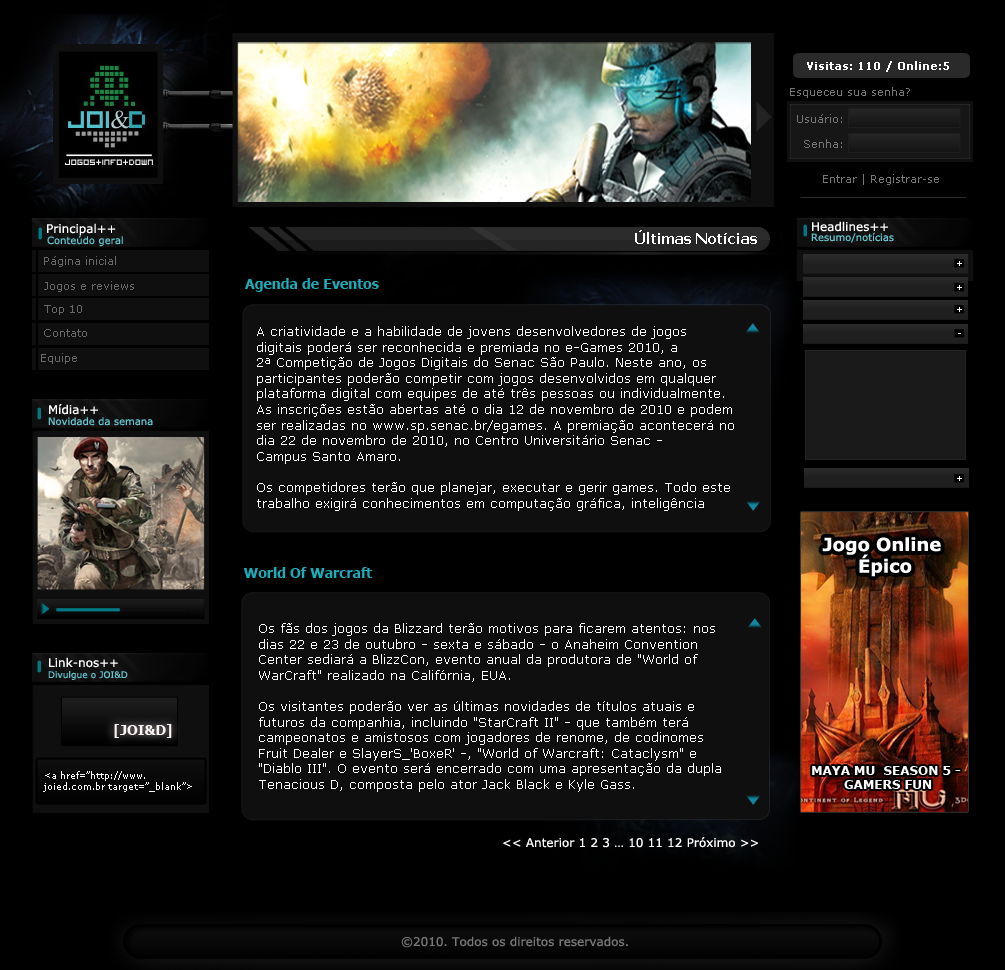
<style>
.page{position:relative;width:1005px;height:970px;background:#000000}
.page>*{position:absolute;margin:0}
.t1{font:11px "Verdana-Bold";color:#ffffff}
.t2{font:11px "Verdana";color:#777777}
.t3{font:12px "Verdana";color:#ffffff}
.t4{font:15px "Tahoma-Bold";color:#ffffff}
.t5{font:10px "Verdana";color:#64c5ce}
.t6{font:11px "Verdana";color:#696969}
.t7{font:14px "Tahoma-Bold";color:#1bacb9}
.t8{font:13px "Verdana";color:#ffffff}
.t9{font:18px "Verdana-Bold";color:#ffffff}
.t10{font:9px "Verdana";color:#64c5ce}
.t11{font:14px "Tahoma-Bold";color:#fff3f3}
.t12{font:9px "Verdana";color:#ffffff}
.t13{font:12px "Verdana-Bold";color:#ffffff}
.t14{font:12px "Verdana";color:#777777}
</style>
<div class="page">
<p class="t1" style="left:807px;top:61px;width:142px;height:11px">Visitas: 110 / Online:5</p>
<p class="t2" style="left:790px;top:87px;width:120px;height:11px">Esqueceu sua senha?</p>
<p class="t2" style="left:797px;top:114px;width:45px;height:9px">Usuário:</p>
<p class="t2" style="left:804px;top:139px;width:38px;height:9px">Senha:</p>
<p class="t2" style="left:823px;top:174px;width:116px;height:11px">Entrar | Registrar-se</p>
<p class="t3" style="left:812px;top:221px;width:76px;height:11px">Headlines++</p>
<p class="t3" style="left:47px;top:223px;width:69px;height:13px">Principal++</p>
<p class="t4" style="left:635px;top:230px;width:122px;height:14px">Últimas Notícias</p>
<p class="t5" style="left:811px;top:232px;width:83px;height:11px">Resumo/notícias</p>
<p class="t5" style="left:47px;top:235px;width:76px;height:12px">Conteúdo geral</p>
<p class="t6" style="left:44px;top:256px;width:72px;height:11px">Página inicial</p>
<p class="t6" style="left:44px;top:281px;width:90px;height:11px">Jogos e reviews</p>
<p class="t7" style="left:245px;top:278px;width:134px;height:14px">Agenda de Eventos</p>
<p class="t6" style="left:44px;top:305px;width:38px;height:10px">Top 10</p>
<p class="t6" style="left:44px;top:329px;width:43px;height:8px">Contato</p>
<p class="t8" style="left:257px;top:326px;width:477px;height:185px">A criatividade e a habilidade de jovens desenvolvedores de jogos <br>digitais poderá ser reconhecida e premiada no e-Games 2010, a <br>2ª Competição de Jogos Digitais do Senac São Paulo. Neste ano, os <br>participantes poderão competir com jogos desenvolvidos em qualquer <br>plataforma digital com equipes de até três pessoas ou individualmente. <br>As inscrições estão abertas até o dia 12 de novembro de 2010 e podem <br>ser realizadas no www.sp.senac.br/egames. A premiação acontecerá no <br>dia 22 de novembro de 2010, no Centro Universitário Senac - <br>Campus Santo Amaro.<br><br>Os competidores terão que planejar, executar e gerir games. Todo este<br>trabalho exigirá conhecimentos em computação gráfica, inteligência</p>
<p class="t6" style="left:41px;top:353px;width:36px;height:11px">Equipe</p>
<p class="t3" style="left:49px;top:404px;width:49px;height:11px">Mídia++</p>
<p class="t5" style="left:48px;top:417px;width:105px;height:9px">Novidade da semana</p>
<p class="t9" style="left:822px;top:537px;width:119px;height:40px;text-align:center">Jogo Online <br>Épico</p>
<p class="t7" style="left:244px;top:567px;width:128px;height:11px">World Of Warcraft</p>
<p class="t8" style="left:259px;top:623px;width:462px;height:169px">Os fãs dos jogos da Blizzard terão motivos para ficarem atentos: nos <br>dias 22 e 23 de outubro - sexta e sábado - o Anaheim Convention <br>Center sediará a BlizzCon, evento anual da produtora de "World of <br>WarCraft" realizado na Califórnia, EUA.<br> <br>Os visitantes poderão ver as últimas novidades de títulos atuais e <br>futuros da companhia, incluindo "StarCraft II" - que também terá<br>campeonatos e amistosos com jogadores de renome, de codinomes <br>Fruit Dealer e SlayerS_'BoxeR' -, "World of Warcraft: Cataclysm" e <br>"Diablo III". O evento será encerrado com uma apresentação da dupla<br>Tenacious D, composta pelo ator Jack Black e Kyle Gass.</p>
<p class="t3" style="left:49px;top:657px;width:69px;height:11px">Link-nos++</p>
<p class="t10" style="left:48px;top:671px;width:80px;height:9px">Divulgue o JOI&amp;D</p>
<p class="t11" style="left:114px;top:724px;width:58px;height:14px">[JOI&amp;D]</p>
<p class="t12" style="left:43px;top:771px;width:149px;height:21px">&lt;a href=”http://www.<br>joied.com.br target=”_blank”&gt;</p>
<p class="t13" style="left:812px;top:766px;width:149px;height:23px;text-align:center">MAYA MU  SEASON 5 -<br> GAMERS FUN</p>
<p class="t3" style="left:503px;top:837px;width:255px;height:11px">&lt;&lt; Anterior 1 2 3 … 10 11 12 Próximo &gt;&gt;</p>
<p class="t14" style="left:401px;top:936px;width:227px;height:12px">©2010. Todos os direitos reservados.</p>
</div>
